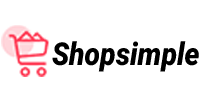
<style>
.page{position:relative;width:200px;height:100px;background:#ffffff}
.page>*{position:absolute;margin:0}
.t1{font:31.4px "Roboto-BlackItalic";color:#000000;scale:0.9 1}
</style>
<div class="page">
<p class="t1" style="left:52px;top:41px;width:147px;height:31px">Shopsimple</p>
</div>
